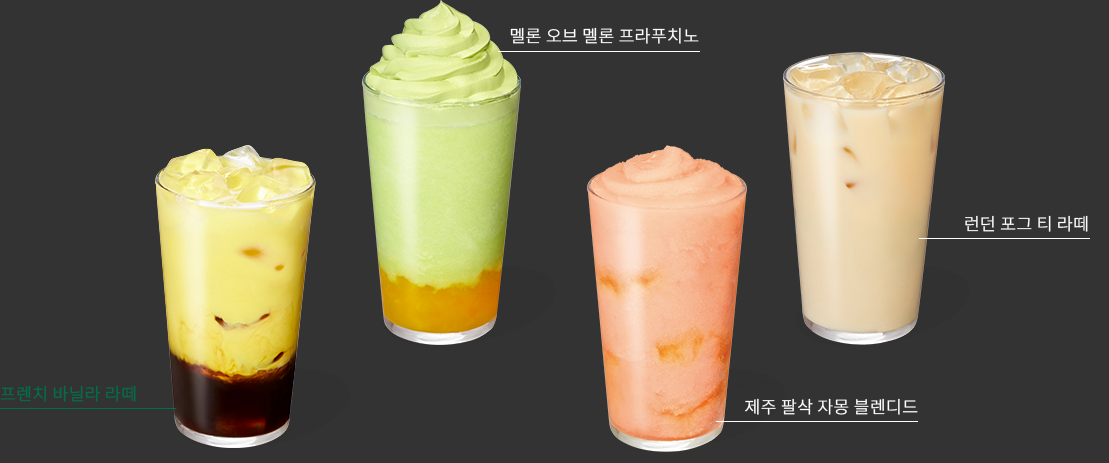
<style>
.page{position:relative;width:1109px;height:463px;background:#333333}
.page>*{position:absolute;margin:0}
.t1{font:17px "NotoSansKR-ExtraLight";color:#ffffff;font-weight:bold}
.t2{font:17px "NotoSansKR-ExtraLight";color:#00704a;font-weight:bold}
</style>
<div class="page">
<p class="t1" style="left:510px;top:27px;width:189px;height:17px">멜론 오브 멜론 프라푸치노</p>
<p class="t1" style="left:965px;top:215px;width:123px;height:17px">런던 포그 티 라떼</p>
<p class="t2" style="left:0px;top:385px;width:136px;height:17px">프렌치 바닐라 라떼</p>
<p class="t1" style="left:745px;top:398px;width:173px;height:17px">제주 팔삭 자몽 블렌디드</p>
</div>
